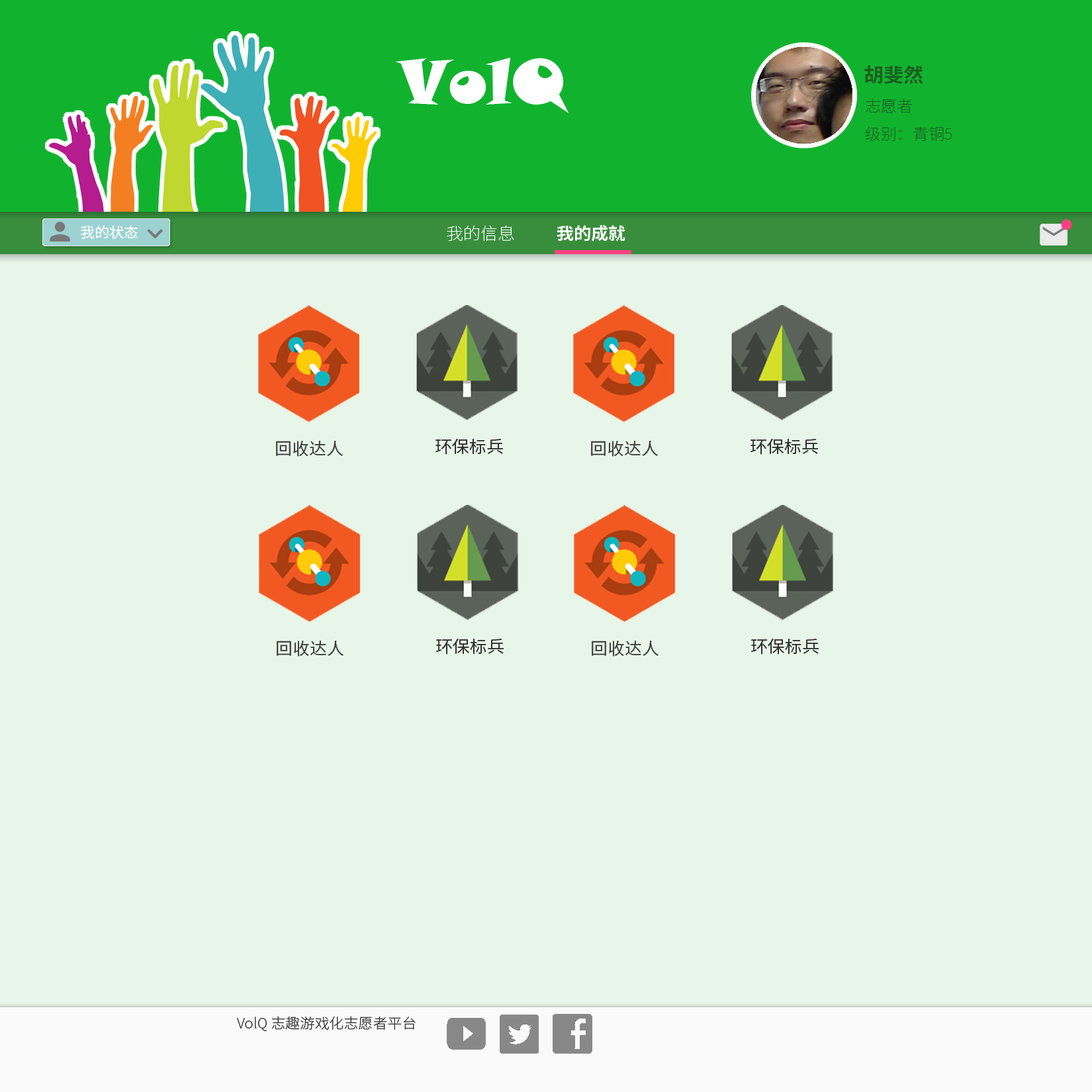
<style>
.page{position:relative;width:1092px;height:1092px;background:#e8f5e9}
.page>*{position:absolute;margin:0}
.t1{font:62.3px "SnapITC-Regular";color:#ffffff}
.t2{font:19.5px "NotoSansCJKsc-Bold";color:#1b5e20}
.t3{font:15.6px "NotoSansCJKsc-Thin";color:#1b5e20}
.t4{font:16.9px "NotoSansCJKsc-Thin";color:#ffffff}
.t5{font:16.9px "NotoSansCJKsc-Bold";color:#ffffff}
.t6{font:14.3px "NotoSansCJKsc-Light";color:#353535}
</style>
<div class="page">
<p class="t1" style="left:395px;top:58px;width:174px;height:55px">VolQ</p>
<p class="t2" style="left:864px;top:65px;width:59px;height:19px">胡斐然</p>
<p class="t3" style="left:865px;top:99px;width:87px;height:42px">志愿者<br>级别：青铜5</p>
<p class="t4" style="left:447px;top:225px;width:67px;height:16px">我的信息</p>
<p class="t5" style="left:557px;top:225px;width:68px;height:17px">我的成就</p>
<p class="t6" style="left:237px;top:1016px;width:179px;height:15px">VolQ 志趣游戏化志愿者平台</p>
</div>
